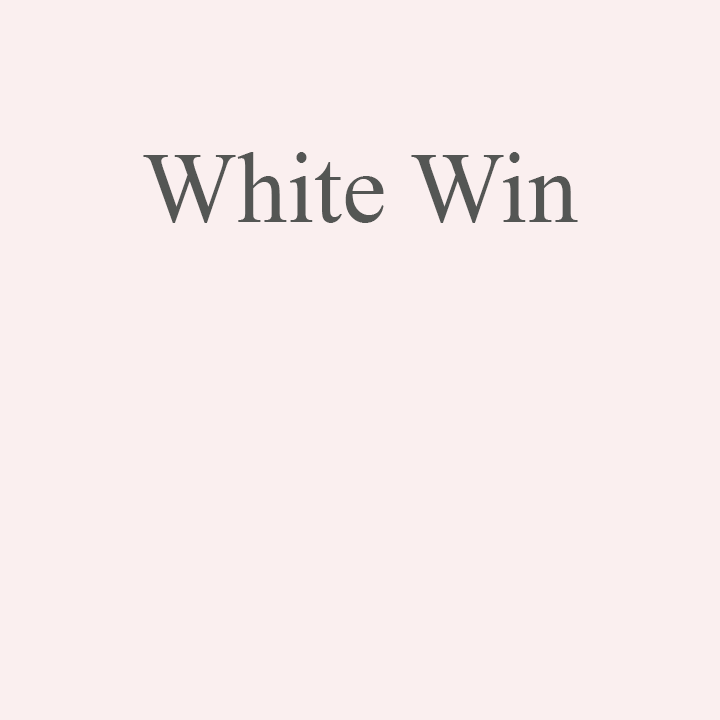
<style>
.page{position:relative;width:720px;height:720px;background:#faefef}
.page>*{position:absolute;margin:0}
.t1{font:100px "TimesNewRomanPSMT";color:#545654}
</style>
<div class="page">
<p class="t1" style="left:143px;top:152px;width:435px;height:71px">White Win</p>
</div>
